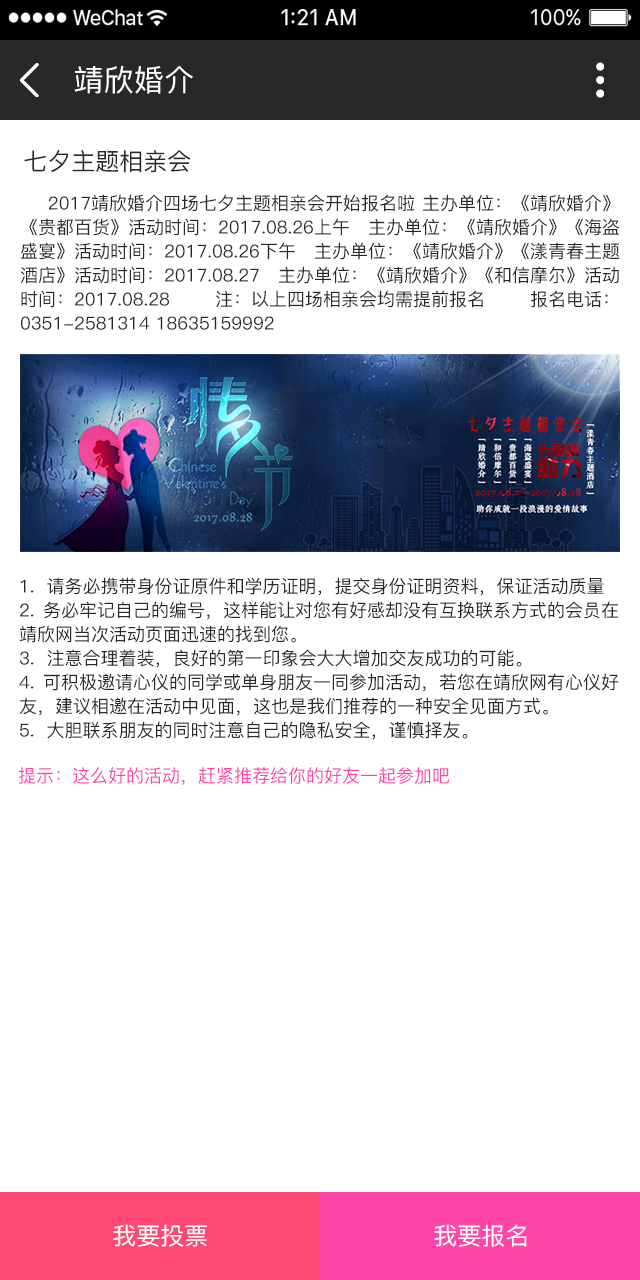
<style>
.page{position:relative;width:640px;height:1280px;background:#ffffff}
.page>*{position:absolute;margin:0}
.t1{font:30px "PingFang-SC-Medium";letter-spacing:0.01em;color:#ffffff;text-transform:uppercase}
.t2{font:24px "PingFang-SC-Medium";color:#282828;text-transform:uppercase}
.t3{font:18px/24px "PingFang-SC-Medium";color:#282828;text-transform:uppercase}
.t4{font:18px "PingFang-SC-Medium";color:#ff45a8;text-transform:uppercase}
.t5{font:24px "PingFang-SC-Medium";color:#ffffff;text-transform:uppercase}
</style>
<div class="page">
<p class="t1" style="left:74px;top:65px;width:119px;height:29px">靖欣婚介</p>
<p class="t2" style="left:24px;top:150px;width:167px;height:23px">七夕主题相亲会</p>
<p class="t3" style="left:20px;top:194px;width:600px;height:136px;text-align:justify">2017靖欣婚介四场七夕主题相亲会开始报名啦 主办单位：《靖欣婚介》《贵都百货》活动时间：2017.08.26上午 主办单位：《靖欣婚介》《海盗盛宴》活动时间：2017.08.26下午 主办单位：《靖欣婚介》《漾青春主题酒店》活动时间：2017.08.27 主办单位：《靖欣婚介》《和信摩尔》活动时间：2017.08.28 注：以上四场相亲会均需提前报名 报名电话：0351-2581314 18635159992</p>
<p class="t3" style="left:19px;top:577px;width:600px;height:163px;text-align:justify">1.  请务必携带身份证原件和学历证明，提交身份证明资料，保证活动质量<br>2. 务必牢记自己的编号，这样能让对您有好感却没有互换联系方式的会员在靖欣网当次活动页面迅速的找到您。<br>3.  注意合理着装，良好的第一印象会大大增加交友成功的可能。<br>4. 可积极邀请心仪的同学或单身朋友一同参加活动，若您在靖欣网有心仪好友，建议相邀在活动中见面，这也是我们推荐的一种安全见面方式。<br>5.  大胆联系朋友的同时注意自己的隐私安全，谨慎择友。</p>
<p class="t4" style="left:18px;top:767px;width:431px;height:18px">提示：这么好的活动，赶紧推荐给你的好友一起参加吧</p>
<p class="t5" style="left:113px;top:1224px;width:94px;height:23px">我要投票</p>
<p class="t5" style="left:434px;top:1224px;width:93px;height:23px">我要报名</p>
</div>
